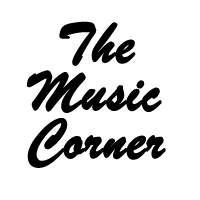
<style>
.page{position:relative;width:200px;height:200px;background:#ffffff}
.page>*{position:absolute;margin:0}
.t1{font:60px/48px "BrushScriptMT";color:#000000;font-weight:bold}
</style>
<div class="page">
<p class="t1" style="left:26px;top:21px;width:140px;height:147px;text-align:center">The<br>Music<br>Corner</p>
</div>
